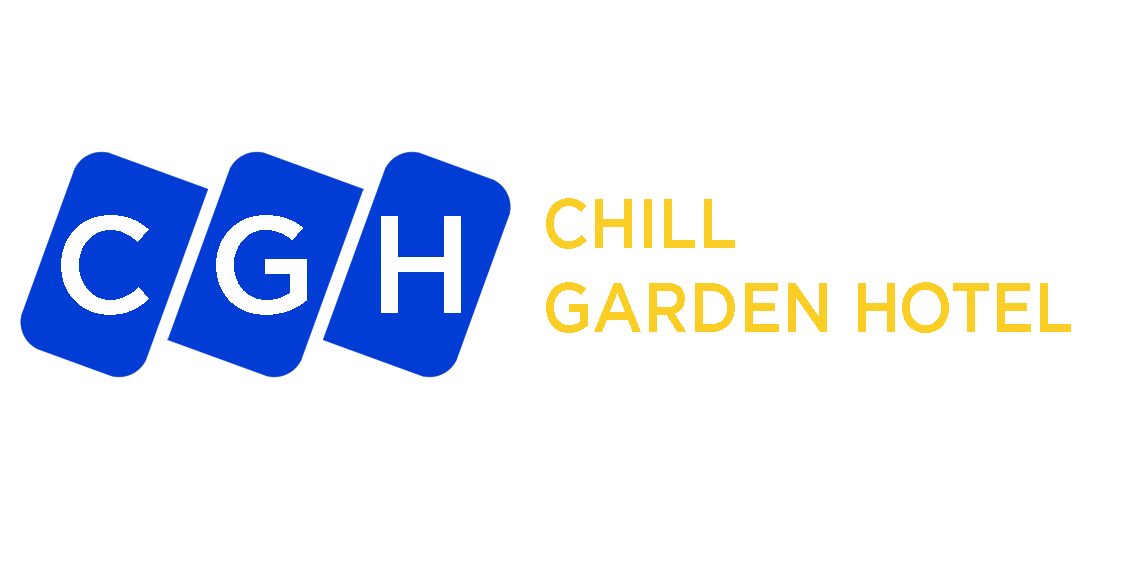
<style>
.page{position:relative;width:1134px;height:567px;background:#ffffff}
.page>*{position:absolute;margin:0}
.t1{font:70.1px "iCielGotham-Medium";color:#face24;scale:0.91 1}
.t2{font:138.1px "iCielGotham-Medium";color:#ffffff}
</style>
<div class="page">
<p class="t1" style="left:546px;top:198px;width:525px;height:135px">CHILL<br>GARDEN HOTEL</p>
<p class="t2" style="left:61px;top:215px;width:88px;height:100px">C</p>
<p class="t2" style="left:216px;top:215px;width:91px;height:100px">G</p>
<p class="t2" style="left:381px;top:216px;width:80px;height:97px">H</p>
</div>
